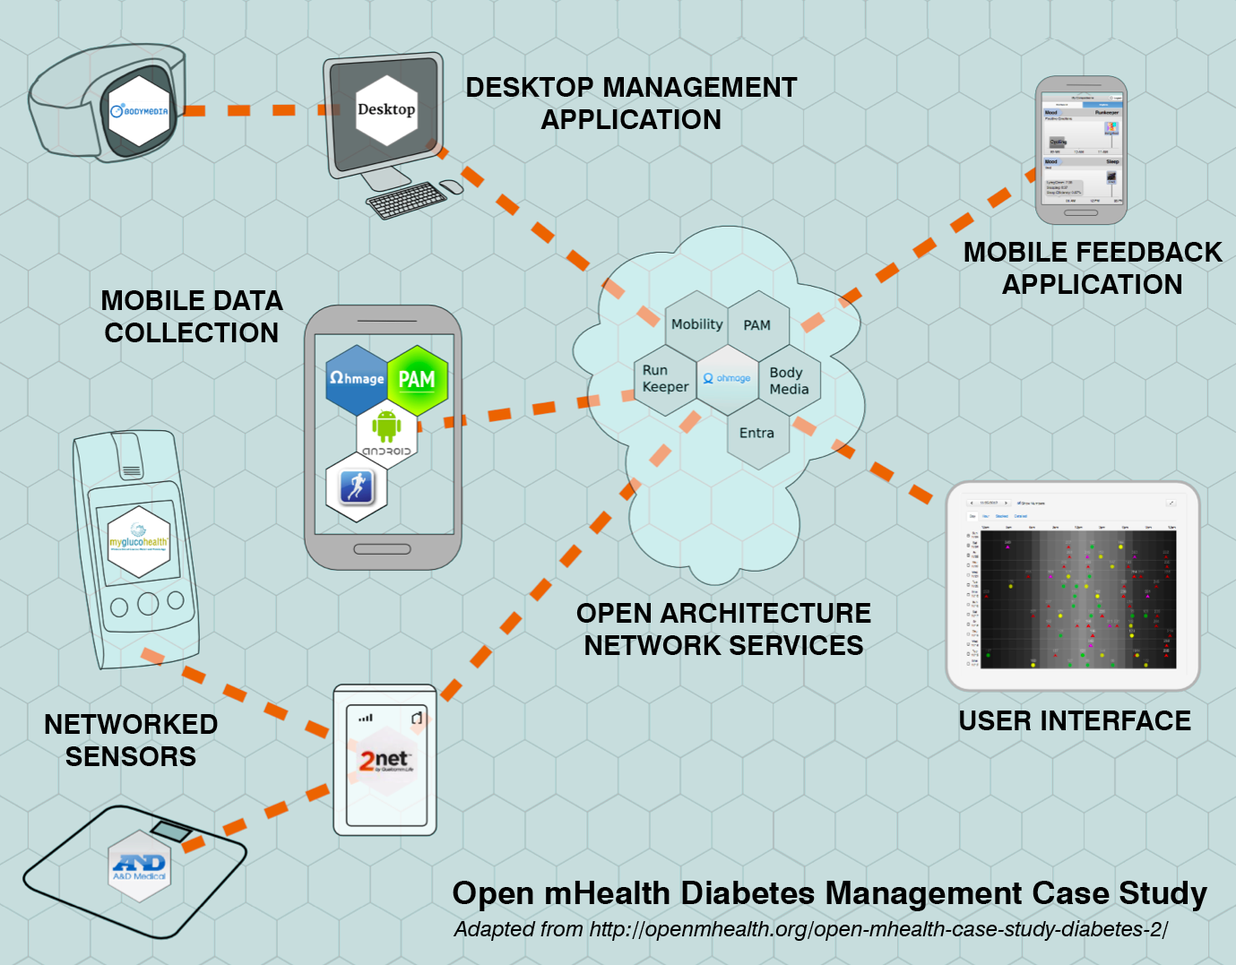
<style>
.page{position:relative;width:1236px;height:965px;background:#c7dddd}
.page>*{position:absolute;margin:0}
.t1{font:26.9px "Swiss721BT-Bold";color:#000000}
.t2{font:32.3px "Swiss721BT-Bold";color:#000000}
.t3{font:21.5px "Swiss721BT-Italic";color:#000000}
</style>
<div class="page">
<p class="t1" style="left:467px;top:77px;width:330px;height:52px;text-align:center">DESKTOP MANAGEMENT<br>APPLICATION</p>
<p class="t1" style="left:964px;top:242px;width:259px;height:52px;text-align:center">MOBILE FEEDBACK<br>APPLICATION</p>
<p class="t1" style="left:102px;top:290px;width:182px;height:52px;text-align:center">MOBILE DATA<br>COLLECTION</p>
<p class="t1" style="left:576px;top:603px;width:295px;height:52px;text-align:center">OPEN ARCHITECTURE<br>NETWORK SERVICES</p>
<p class="t1" style="left:960px;top:711px;width:231px;height:19px">USER INTERFACE</p>
<p class="t1" style="left:45px;top:714px;width:173px;height:52px;text-align:center">NETWORKED<br>SENSORS</p>
<p class="t2" style="left:452px;top:881px;width:756px;height:30px">Open mHealth Diabetes Management Case Study</p>
<p class="t3" style="left:452px;top:920px;width:716px;height:21px">Adapted from http://openmhealth.org/open-mhealth-case-study-diabetes-2/</p>
</div>
